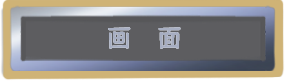
<style>
.page{position:relative;width:285px;height:81px;background:#5d5d60}
.page>*{position:absolute;margin:0}
.t1{font:25.1px "MaokenZhuyuanTi-Regular";letter-spacing:1em;color:#a7aec2}
</style>
<div class="page">
<p class="t1" style="left:108px;top:27px;width:73px;height:22px">画面</p>
<p class="t1" style="left:108px;top:27px;width:73px;height:22px">画面</p>
</div>
